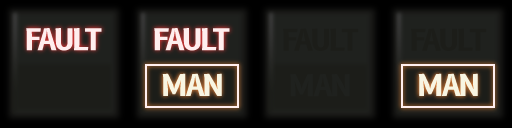
<style>
.page{position:relative;width:512px;height:128px}
.page>*{position:absolute;margin:0}
.t1{font:29.2px "B612-Bold";letter-spacing:-0.075em;color:#ffeeee}
.t2{font:29.2px "B612-Bold";letter-spacing:-0.075em;color:#1c1d19}
.t3{font:29.2px "B612-Bold";letter-spacing:-0.075em;color:#1f211e}
.t4{font:29.2px "B612-Bold";letter-spacing:-0.075em;color:#f8f5e2}
</style>
<div class="page">
<p class="t1" style="left:155px;top:28px;width:76px;height:23px">FAULT</p>
<p class="t2" style="left:283px;top:28px;width:76px;height:23px">FAULT</p>
<p class="t2" style="left:411px;top:28px;width:76px;height:23px">FAULT</p>
<p class="t3" style="left:290px;top:74px;width:60px;height:23px">MAN</p>
<p class="t4" style="left:418px;top:73px;width:60px;height:23px">MAN</p>
</div>
